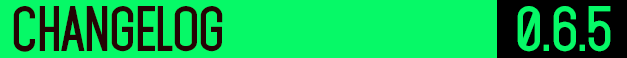
<style>
.page{position:relative;width:627px;height:58px;background:#06f967}
.page>*{position:absolute;margin:0}
.t1{font:55px "Mohave-Bold";letter-spacing:-0.025em;color:#240404;text-transform:uppercase}
.t2{font:55px "Mohave-Bold";letter-spacing:-0.025em;color:#06f967;text-transform:uppercase}
</style>
<div class="page">
<p class="t1" style="left:13px;top:6px;width:210px;height:46px">changelog</p>
<p class="t2" style="left:517px;top:6px;width:94px;height:46px">0.6.5</p>
</div>
